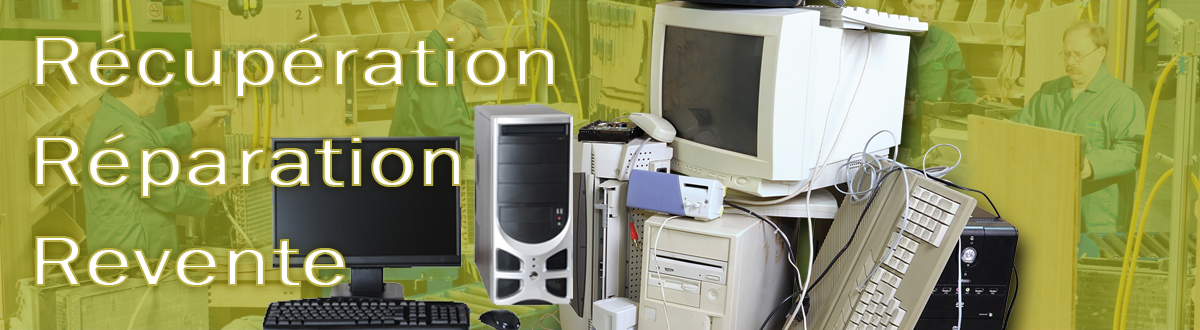
<style>
.page{position:relative;width:1200px;height:330px}
.page>*{position:absolute;margin:0}
.t1{font:73.5px/99.9px "FranklinGothic-Book";font-weight:bold;scale:1.22 1}
</style>
<div class="page">
<p class="t1" style="left:35px;top:32px;width:520px;height:255px">Récupération<br>Réparation<br>Revente</p>
</div>
